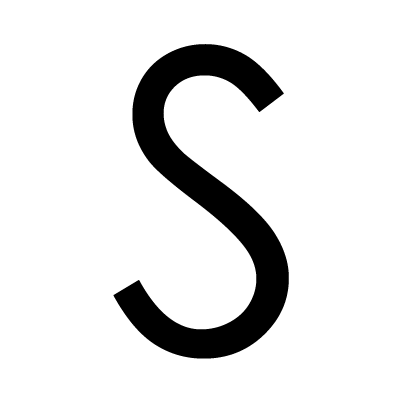
<style>
.page{position:relative;width:400px;height:400px;background:#ffffff}
.page>*{position:absolute;margin:0}
.t1{font:416.7px "CenturyGothic";color:#000000}
</style>
<div class="page">
<p class="t1" style="left:113px;top:44px;width:176px;height:315px">S</p>
</div>
